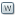
<style>
.page{position:relative;width:16px;height:16px;background:#ffffff}
.page>*{position:absolute;margin:0}
.t1{font:10px "Tahoma";color:#3d4d54}
</style>
<div class="page">
<p class="t1" style="left:4px;top:5px;width:8px;height:6px">w</p>
</div>
